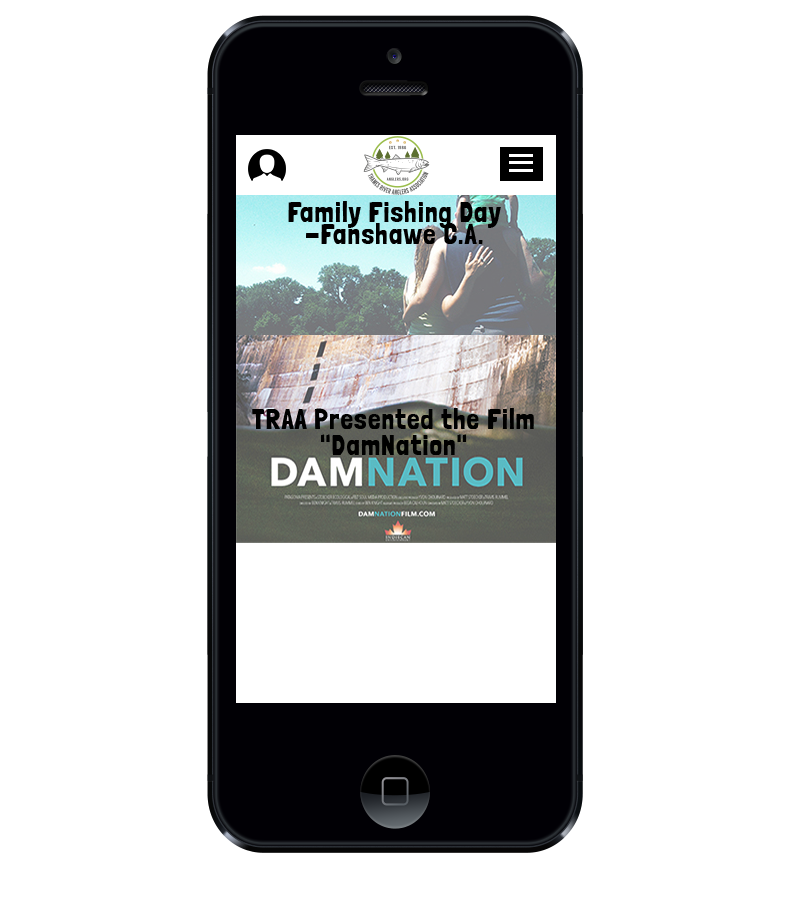
<style>
.page{position:relative;width:800px;height:900px;background:#ffffff}
.page>*{position:absolute;margin:0}
.t1{font:28px "LondrinaSolid-Regular";letter-spacing:0.04em;color:#000000}
</style>
<div class="page">
<p class="t1" style="left:288px;top:201px;width:213px;height:43px">Family Fishing Day -Fanshawe C.A.</p>
<p class="t1" style="left:252px;top:408px;width:282px;height:47px">TRAA Presented the Film "DamNation"</p>
</div>
